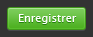
<style>
.page{position:relative;width:93px;height:37px;background:#333333}
.page>*{position:absolute;margin:0}
.t1{font:11px "LucidaGrande";color:#ffffff}
</style>
<div class="page">
<p class="t1" style="left:19px;top:14px;width:58px;height:10px">Enregistrer</p>
</div>
